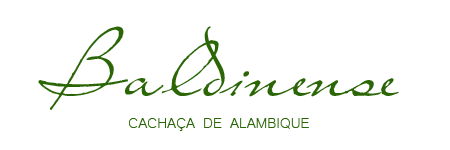
<style>
.page{position:relative;width:450px;height:150px;background:#ffffff}
.page>*{position:absolute;margin:0}
.t1{font:100px "LivingTogether";color:#2a6606}
.t2{font:18px "Microsoft-Yi-Baiti";color:#2a6606}
</style>
<div class="page">
<p class="t1" style="left:38px;top:26px;width:361px;height:84px">Baldinense</p>
<p class="t2" style="left:129px;top:118px;width:180px;height:13px">CACHAÇA DE ALAMBIQUE</p>
</div>
